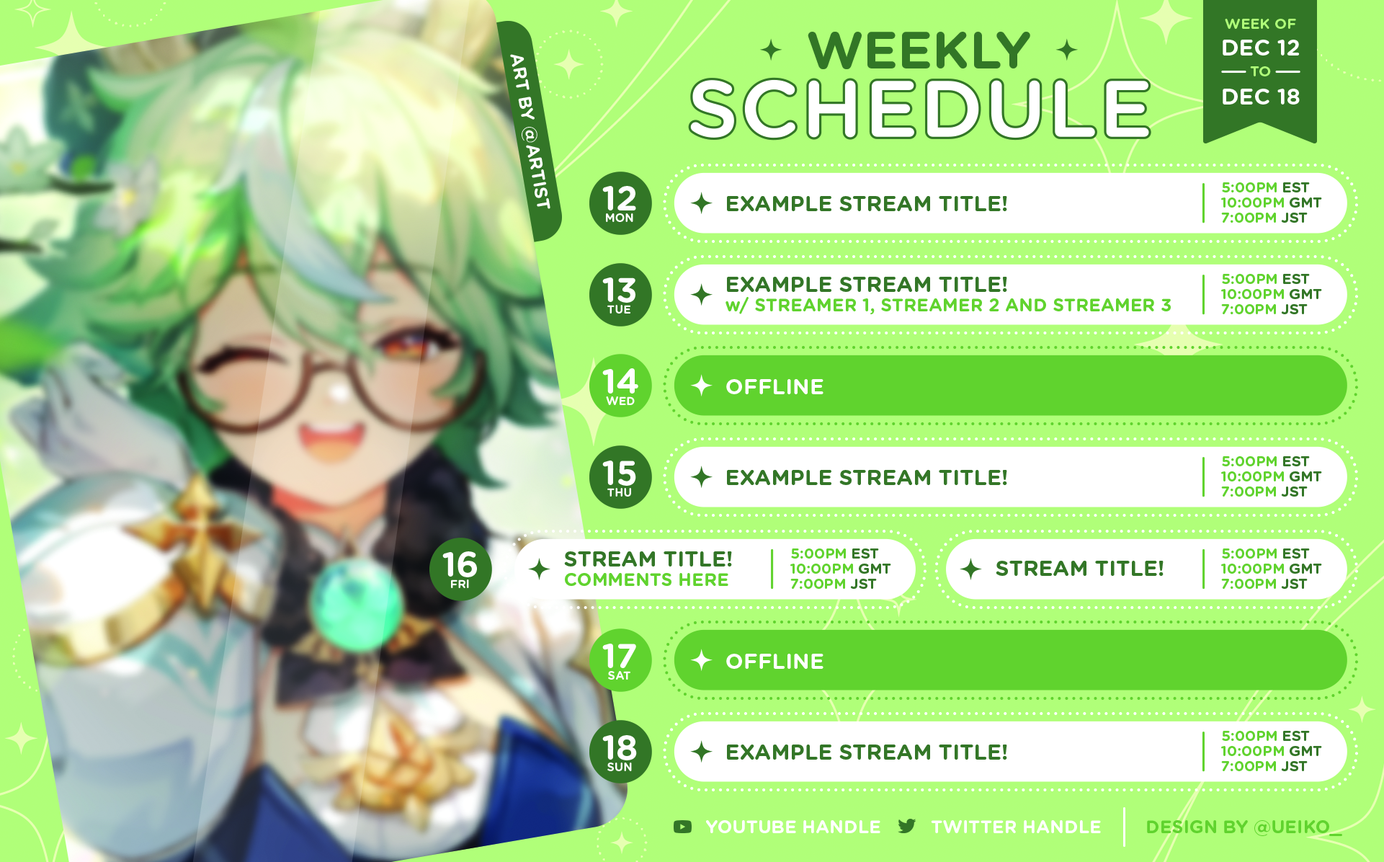
<style>
.page{position:relative;width:1384px;height:862px}
.page>*{position:absolute;margin:0}
.t1{font:14.4px "GothamRounded-Bold";color:#b0ff79}
.t2{font:22.3px "GothamRounded-Bold";color:#ffffff}
.t3{font:18px "GothamRounded-Bold";color:#ffffff}
.t4{font:34.6px "GothamRounded-Bold";color:#ffffff}
.t5{font:14.4px "GothamRounded-Bold";color:#60d42f}
.t6{font:14.4px "GothamRounded-Bold";color:#337627}
.t7{font:21.6px "GothamRounded-Bold";color:#337627}
.t8{font:11.5px "GothamRounded-Bold";color:#ffffff}
.t9{font:18px "GothamRounded-Bold";color:#60d42f}
.t10{font:21.6px "GothamRounded-Bold";color:#ffffff}
</style>
<div class="page">
<p class="t1" style="left:1225px;top:19px;width:71px;height:10px">WEEK OF</p>
<p class="t2" style="left:1223px;top:40px;width:77px;height:15px">DEC 12</p>
<p class="t3" style="left:510px;top:54px;width:40px;height:155px;rotate:80deg">ART BY @ARTIST</p>
<p class="t1" style="left:1250px;top:66px;width:21px;height:10px">TO</p>
<p class="t2" style="left:1223px;top:89px;width:77px;height:15px">DEC 18</p>
<p class="t4" style="left:602px;top:186px;width:34px;height:24px">12</p>
<p class="t5" style="left:1222px;top:182px;width:88px;height:10px">5:00PM <span class="t6">EST</span></p>
<p class="t7" style="left:727px;top:196px;width:280px;height:15px">EXAMPLE STREAM TITLE!</p>
<p class="t5" style="left:1221px;top:197px;width:101px;height:10px">10:00PM <span class="t6">GMT</span></p>
<p class="t8" style="left:606px;top:213px;width:27px;height:9px">MON</p>
<p class="t5" style="left:1221px;top:213px;width:87px;height:10px">7:00PM <span class="t6">JST</span></p>
<p class="t4" style="left:602px;top:277px;width:33px;height:26px">13</p>
<p class="t7" style="left:727px;top:277px;width:280px;height:15px">EXAMPLE STREAM TITLE!</p>
<p class="t5" style="left:1222px;top:274px;width:88px;height:10px">5:00PM <span class="t6">EST</span></p>
<p class="t5" style="left:1221px;top:289px;width:101px;height:10px">10:00PM <span class="t6">GMT</span></p>
<p class="t8" style="left:607px;top:305px;width:24px;height:8px">TUE</p>
<p class="t9" style="left:725px;top:297px;width:446px;height:17px">w/ STREAMER 1, STREAMER 2 AND STREAMER 3</p>
<p class="t5" style="left:1221px;top:304px;width:87px;height:10px">7:00PM <span class="t6">JST</span></p>
<p class="t4" style="left:602px;top:368px;width:36px;height:25px">14</p>
<p class="t10" style="left:726px;top:379px;width:97px;height:15px">OFFLINE</p>
<p class="t8" style="left:606px;top:396px;width:29px;height:9px">WED</p>
<p class="t4" style="left:602px;top:460px;width:34px;height:26px">15</p>
<p class="t5" style="left:1222px;top:456px;width:88px;height:10px">5:00PM <span class="t6">EST</span></p>
<p class="t7" style="left:727px;top:470px;width:280px;height:15px">EXAMPLE STREAM TITLE!</p>
<p class="t5" style="left:1221px;top:471px;width:101px;height:10px">10:00PM <span class="t6">GMT</span></p>
<p class="t8" style="left:607px;top:488px;width:24px;height:8px">THU</p>
<p class="t5" style="left:1221px;top:486px;width:87px;height:10px">7:00PM <span class="t6">JST</span></p>
<p class="t4" style="left:442px;top:551px;width:35px;height:26px">16</p>
<p class="t7" style="left:564px;top:551px;width:168px;height:15px">STREAM TITLE!</p>
<p class="t5" style="left:791px;top:548px;width:88px;height:10px">5:00PM <span class="t6">EST</span></p>
<p class="t5" style="left:1222px;top:548px;width:88px;height:10px">5:00PM <span class="t6">EST</span></p>
<p class="t5" style="left:790px;top:563px;width:101px;height:10px">10:00PM <span class="t6">GMT</span></p>
<p class="t7" style="left:996px;top:560px;width:167px;height:16px">STREAM TITLE!</p>
<p class="t5" style="left:1221px;top:563px;width:101px;height:10px">10:00PM <span class="t6">GMT</span></p>
<p class="t8" style="left:451px;top:579px;width:18px;height:9px">FRI</p>
<p class="t9" style="left:565px;top:573px;width:163px;height:13px">COMMENTS HERE</p>
<p class="t5" style="left:790px;top:578px;width:87px;height:11px">7:00PM <span class="t6">JST</span></p>
<p class="t5" style="left:1221px;top:578px;width:87px;height:11px">7:00PM <span class="t6">JST</span></p>
<p class="t4" style="left:602px;top:643px;width:34px;height:25px">17</p>
<p class="t10" style="left:726px;top:653px;width:97px;height:16px">OFFLINE</p>
<p class="t8" style="left:608px;top:671px;width:22px;height:8px">SAT</p>
<p class="t4" style="left:602px;top:735px;width:35px;height:25px">18</p>
<p class="t5" style="left:1222px;top:731px;width:88px;height:10px">5:00PM <span class="t6">EST</span></p>
<p class="t7" style="left:727px;top:744px;width:280px;height:15px">EXAMPLE STREAM TITLE!</p>
<p class="t5" style="left:1221px;top:746px;width:101px;height:10px">10:00PM <span class="t6">GMT</span></p>
<p class="t5" style="left:1221px;top:761px;width:87px;height:10px">7:00PM <span class="t6">JST</span></p>
<p class="t8" style="left:607px;top:762px;width:25px;height:9px">SUN</p>
<p class="t3" style="left:706px;top:820px;width:174px;height:13px">YOUTUBE HANDLE</p>
<p class="t3" style="left:931px;top:820px;width:170px;height:13px">TWITTER HANDLE</p>
<p class="t9" style="left:1147px;top:820px;width:195px;height:16px">DESIGN BY @UEIKO_</p>
</div>
